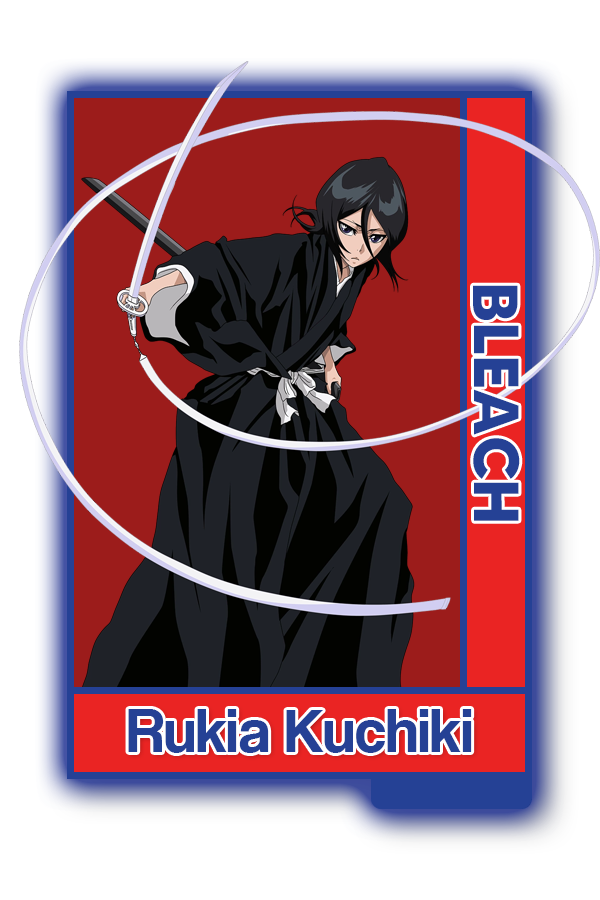
<style>
.page{position:relative;width:600px;height:900px;background:#ffffff}
.page>*{position:absolute;margin:0}
.t1{font:63.6px "MADETOMMY-Bold";color:#254195}
.t2{font:63.6px "CoolveticaRg-Regular";color:#254195}
</style>
<div class="page">
<p class="t1" style="left:473px;top:285px;width:47px;height:236px;rotate:90deg">BLEACH</p>
<p class="t2" style="left:128px;top:709px;width:344px;height:44px">Rukia Kuchiki</p>
</div>
